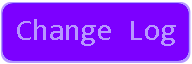
<style>
.page{position:relative;width:192px;height:64px;background:#7c00ff}
.page>*{position:absolute;margin:0}
.t1{font:29.9px "Consolas";color:#b797ff}
</style>
<div class="page">
<p class="t1" style="left:17px;top:19px;width:159px;height:27px">Change Log</p>
</div>
